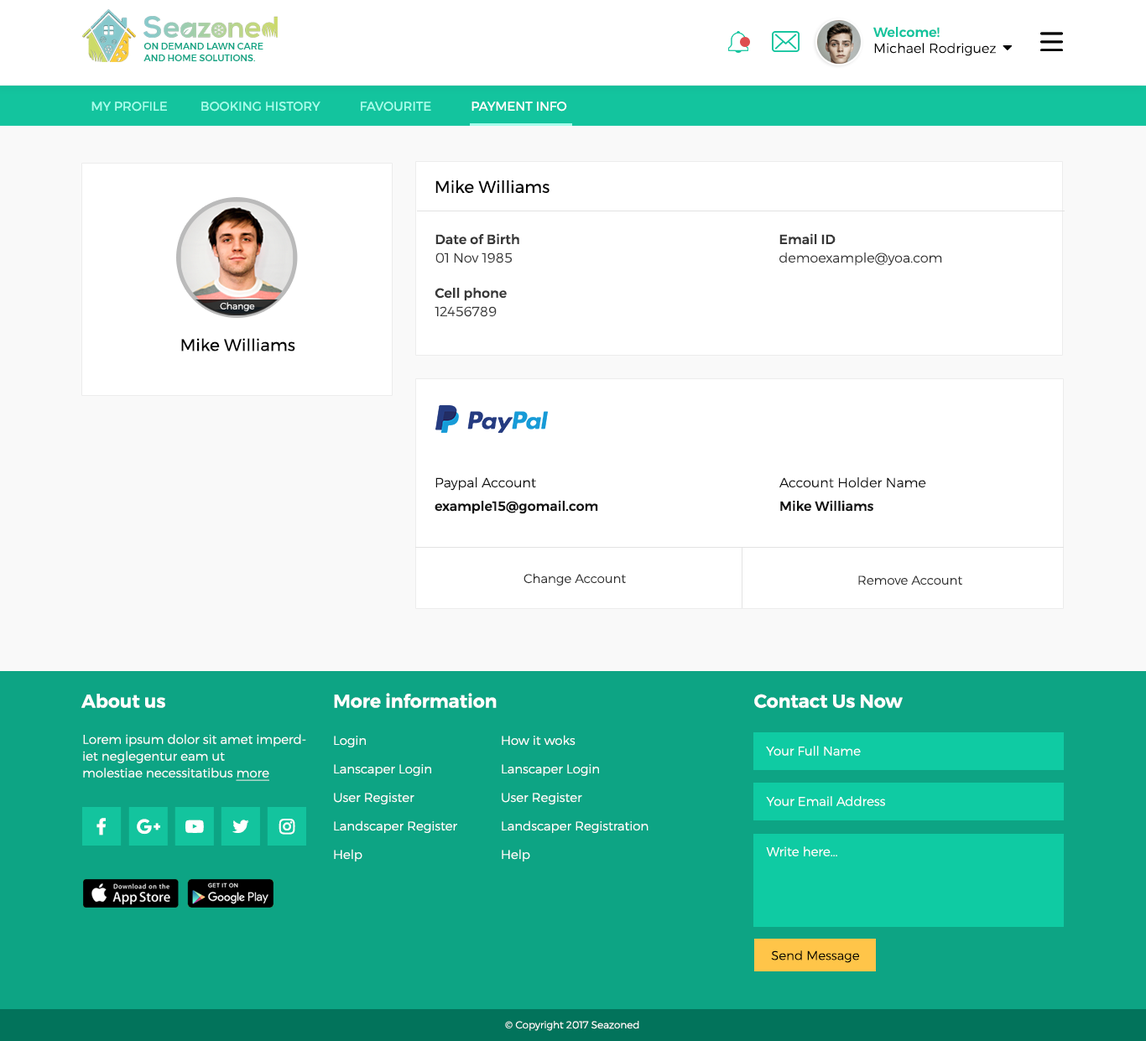
<style>
.page{position:relative;width:1146px;height:1041px;background:#ffffff}
.page>*{position:absolute;margin:0}
.t1{font:13.4px "Montserrat-Light";color:#000000}
.t2{font:13.4px "Montserrat-Medium";color:#13c49e}
.t3{font:9.2px "Montserrat-Medium";color:#0da484;text-transform:uppercase}
.t4{font:12.6px "Montserrat-Regular";color:#a6feeb;text-transform:uppercase}
.t5{font:12.6px "Montserrat-Regular";color:#ffffff;text-transform:uppercase}
.t6{font:16.8px "Montserrat-Regular";color:#000000}
.t7{font:13.4px/18.5px "Montserrat-Medium";color:#383838}
.t8{font:13.4px/18.5px "Montserrat-Light";color:#383838}
.t9{font:9.1px "Montserrat-Light";color:#ffffff}
.t10{font:13.4px/23.5px "Montserrat-Medium";color:#121212}
.t11{font:13.4px/23.5px "Montserrat-Light";color:#121212}
.t12{font:12.6px "Montserrat-Light";color:#2f2f2f}
.t13{font:18.5px "Montserrat-SemiBold";color:#ffffff}
.t14{font:12.6px/16.8px "Montserrat-Light";color:#ffffff}
.t15{font:12.6px/16.8px "Montserrat-Light";color:#ffffff;text-decoration:underline}
.t16{font:12.6px/28.5px "Montserrat-Light";color:#ffffff}
.t17{font:12.6px "Montserrat-Light";color:#ffffff}
.t18{font:12.6px "Montserrat-Light";color:#000000}
.t19{font:10.1px "Montserrat-Light";color:#ffffff}
</style>
<div class="page">
<p class="t1" style="left:873px;top:27px;width:123px;height:29px"><span class="t2">Welcome! <br></span>Michael Rodriguez</p>
<p class="t3" style="left:143px;top:43px;width:120px;height:18px">on demand lawn care <br>and home solutions.</p>
<p class="t4" style="left:91px;top:101px;width:476px;height:11px">my profile          booking history            favourite<span class="t5">            payment info</span></p>
<p class="t6" style="left:435px;top:180px;width:114px;height:13px">Mike Williams</p>
<p class="t7" style="left:435px;top:233px;width:84px;height:30px">Date of Birth<br><span class="t8">01 Nov 1985</span></p>
<p class="t8" style="left:779px;top:233px;width:163px;height:33px"><span class="t7">Email ID<br></span>demoexample@yoa.com</p>
<p class="t7" style="left:434px;top:288px;width:73px;height:29px">Cell phone<br><span class="t8">12456789</span></p>
<p class="t9" style="left:220px;top:302px;width:35px;height:9px">Change</p>
<p class="t6" style="left:181px;top:338px;width:114px;height:13px">Mike Williams</p>
<p class="t10" style="left:434px;top:477px;width:164px;height:37px"><span class="t11">Paypal Account<br></span>example15@gomail.com</p>
<p class="t11" style="left:779px;top:477px;width:147px;height:35px">Account Holder Name<br><span class="t10">Mike Williams</span></p>
<p class="t12" style="left:523px;top:573px;width:103px;height:12px">Change Account</p>
<p class="t12" style="left:858px;top:575px;width:104px;height:10px">Remove Account</p>
<p class="t13" style="left:81px;top:694px;width:84px;height:14px">About us</p>
<p class="t13" style="left:334px;top:693px;width:163px;height:15px">More information</p>
<p class="t13" style="left:754px;top:694px;width:148px;height:14px">Contact Us Now</p>
<p class="t14" style="left:83px;top:734px;width:223px;height:47px">Lorem ipsum dolor sit amet imperdiet neglegentur eam ut<br>molestiae necessitatibus <span class="t15">more</span></p>
<p class="t16" style="left:334px;top:736px;width:123px;height:125px">Login<br>Lanscaper Login<br>User Register<br>Landscaper Register<br>Help</p>
<p class="t16" style="left:502px;top:735px;width:146px;height:126px">How it woks<br>Lanscaper Login<br>User Register<br>Landscaper Registration<br>Help</p>
<p class="t17" style="left:766px;top:746px;width:95px;height:10px">Your Full Name</p>
<p class="t17" style="left:766px;top:796px;width:119px;height:10px">Your Email Address</p>
<p class="t17" style="left:766px;top:846px;width:71px;height:10px">Write here...</p>
<p class="t18" style="left:771px;top:950px;width:88px;height:13px">Send Message</p>
<p class="t19" style="left:505px;top:1021px;width:134px;height:10px">© Copyright 2017 Seazoned</p>
</div>
